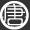
<style>
.page{position:relative;width:30px;height:30px;background:#333333}
.page>*{position:absolute;margin:0}
.t1{font:23.4px "YouYuan";letter-spacing:0.1em;color:#ffffff}
</style>
<div class="page">
<p class="t1" style="left:3px;top:3px;width:22px;height:23px">唐</p>
</div>
